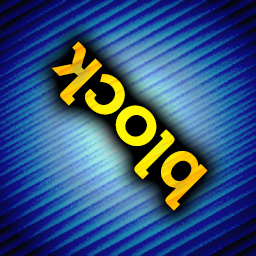
<style>
.page{position:relative;width:256px;height:256px}
.page>*{position:absolute;margin:0}
.t1{font:71.9px "Museo-700";letter-spacing:-0.025em;font-weight:bold}
</style>
<div class="page">
<p class="t1" style="left:52px;top:41px;width:156px;height:170px;rotate:-135deg">block</p>
</div>
